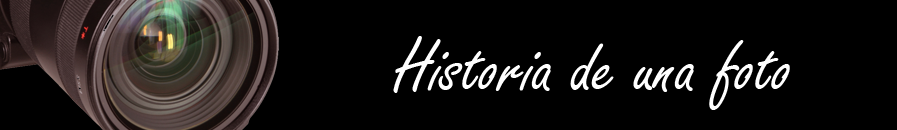
<style>
.page{position:relative;width:897px;height:130px;background:#000000}
.page>*{position:absolute;margin:0}
.t1{font:78.7px "FreestyleScript-Regular";color:#ffffff}
</style>
<div class="page">
<p class="t1" style="left:393px;top:36px;width:397px;height:74px">Historia de una foto</p>
</div>
